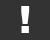
<style>
.page{position:relative;width:50px;height:40px;background:#333333}
.page>*{position:absolute;margin:0}
.t1{font:37px "Arial-Black";letter-spacing:0.01em;color:#ffffff}
</style>
<div class="page">
<p class="t1" style="left:21px;top:6px;width:9px;height:27px">!</p>
</div>
